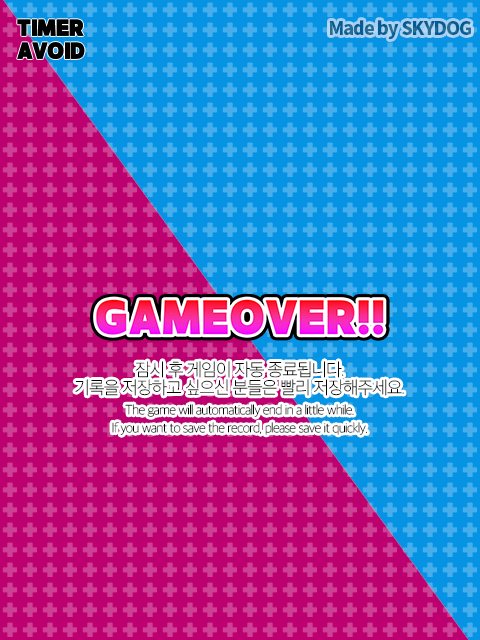
<style>
.page{position:relative;width:480px;height:640px;background:#0793e4}
.page>*{position:absolute;margin:0}
.t1{font:18px "OTSupersizeBk";letter-spacing:-0.025em;color:#000000}
.t2{font:18px "NotoSansCJKkr-Black";letter-spacing:-0.05em}
.t3{font:18px "OTSupersizeBk";letter-spacing:-0.05em;color:#000000}
.t4{font:18px/18px "AppleSDGothicNeoT00";letter-spacing:-0.05em;color:#000000}
.t5{font:14px/18px "AppleSDGothicNeoT00";letter-spacing:-0.05em;color:#000000}
</style>
<div class="page">
<p class="t1" style="left:17px;top:19px;width:67px;height:17px">TIMER</p>
<p class="t2" style="left:330px;top:20px;width:141px;height:19px">Made by SKYDOG</p>
<p class="t3" style="left:17px;top:42px;width:68px;height:17px">AVOID</p>
<p class="t4" style="left:75px;top:361px;width:329px;height:35px;text-align:center">잠시 후 게임이 자동 종료됩니다.<br>기록을 저장하고 싶으신 분들은 빨리 저장해주세요.</p>
<p class="t5" style="left:112px;top:404px;width:255px;height:31px;text-align:center">The game will automatically end in a little while.<br>If you want to save the record, please save it quickly.</p>
</div>
